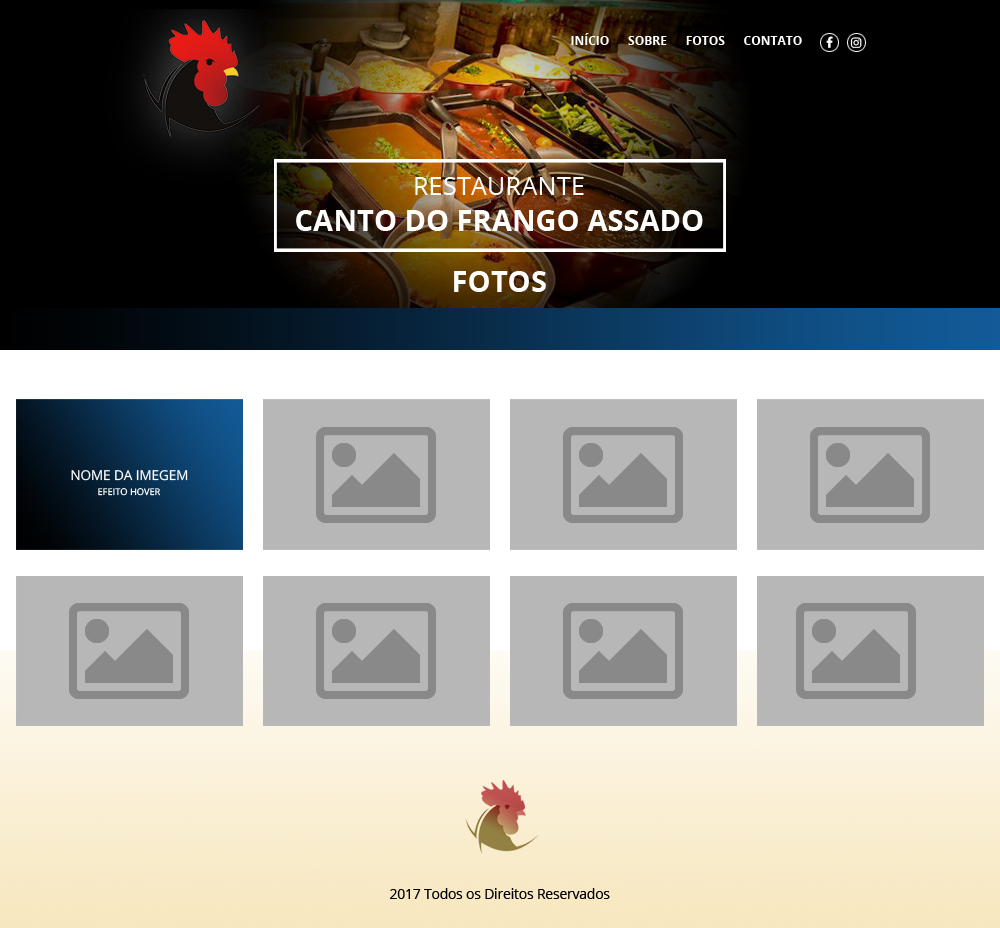
<style>
.page{position:relative;width:1000px;height:928px}
.page>*{position:absolute;margin:0}
.t1{font:12px "OpenSans-Bold";color:#ffffff}
.t2{font:25.5px "OpenSans";color:#ffffff}
.t3{font:29.1px "OpenSans-Bold";color:#ffffff}
.t4{font:13.4px "OpenSans";color:#ffffff}
.t5{font:9.3px "OpenSans";color:#ffffff}
.t6{font:13.5px "OpenSans";color:#000000}
</style>
<div class="page">
<p class="t1" style="left:571px;top:33px;width:231px;height:12px">INÍCIO      SOBRE      FOTOS      CONTATO</p>
<p class="t2" style="left:415px;top:177px;width:169px;height:18px">RESTAURANTE</p>
<p class="t3" style="left:296px;top:210px;width:407px;height:21px">CANTO DO FRANGO ASSADO</p>
<p class="t3" style="left:454px;top:271px;width:92px;height:21px">FOTOS</p>
<p class="t4" style="left:71px;top:470px;width:117px;height:11px">NOME DA IMEGEM</p>
<p class="t5" style="left:98px;top:488px;width:62px;height:8px">EFEITO HOVER</p>
<p class="t6" style="left:390px;top:888px;width:220px;height:11px">2017 Todos os Direitos Reservados</p>
</div>
